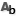
<style>
.page{position:relative;width:16px;height:16px;background:#ffffff}
.page>*{position:absolute;margin:0}
.t1{font:12px "Arial-Black";color:#575757}
.t2{font:12px "LucidaConsole";color:#000000}
</style>
<div class="page">
<p class="t1" style="left:0px;top:2px;width:10px;height:9px">A</p>
<p class="t2" style="left:9px;top:5px;width:7px;height:9px">b</p>
</div>
